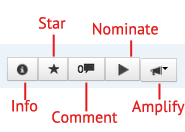
<style>
.page{position:relative;width:185px;height:132px;background:#ffffff}
.page>*{position:absolute;margin:0}
.t1{font:16px "PTSans-Regular";color:#e61c1c}
</style>
<div class="page">
<p class="t1" style="left:38px;top:17px;width:28px;height:12px">Star</p>
<p class="t1" style="left:93px;top:22px;width:65px;height:13px">Nominate</p>
<p class="t1" style="left:12px;top:99px;width:26px;height:13px">Info</p>
<p class="t1" style="left:132px;top:100px;width:53px;height:16px">Amplify</p>
<p class="t1" style="left:52px;top:111px;width:66px;height:12px">Comment</p>
</div>
